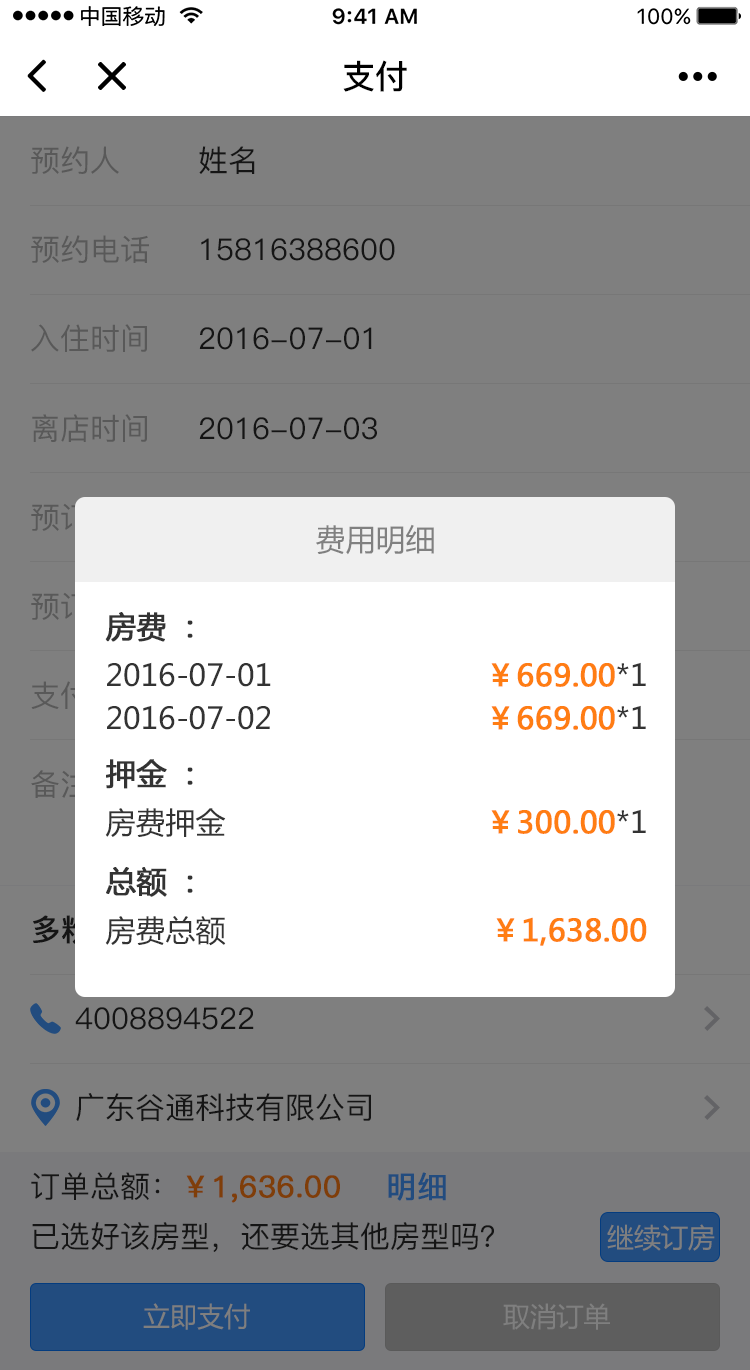
<style>
.page{position:relative;width:750px;height:1370px;background:#7f7f7f}
.page>*{position:absolute;margin:0}
.t1{font:33.2px "PingFang-SC-Bold";color:#000000}
.t2{font:30px "PingFang-SC-Medium";color:#595959}
.t3{font:30px "PingFang-SC-Medium";color:#2b2b2b}
.t4{font:30px "MicrosoftYaHei";color:#808080}
.t5{font:30px "MicrosoftYaHei";color:#333333;font-weight:bold}
.t6{font:30px "MicrosoftYaHei";color:#333333}
.t7{font:30px "MicrosoftYaHei";color:#ff7d13;font-weight:bold}
.t8{font:30px "PingFang-SC-Medium";font-weight:bold}
.t9{font:30px "PingFang-SC-Medium"}
.t10{font:30px "PingFang-SC-Medium";color:#224c7f;font-weight:bold}
.t11{font:27px "MicrosoftYaHei";color:#7f7f7f}
</style>
<div class="page">
<p class="t1" style="left:343px;top:60px;width:64px;height:32px">支付</p>
<p class="t2" style="left:31px;top:146px;width:88px;height:28px">预约人</p>
<p class="t3" style="left:199px;top:146px;width:56px;height:28px">姓名</p>
<p class="t2" style="left:31px;top:235px;width:118px;height:28px">预约电话</p>
<p class="t3" style="left:201px;top:238px;width:194px;height:23px">15816388600</p>
<p class="t2" style="left:31px;top:324px;width:116px;height:28px">入住时间</p>
<p class="t3" style="left:199px;top:327px;width:173px;height:23px">2016-07-01</p>
<p class="t2" style="left:32px;top:414px;width:115px;height:28px">离店时间</p>
<p class="t3" style="left:199px;top:417px;width:178px;height:23px">2016-07-03</p>
<p class="t4" style="left:316px;top:524px;width:118px;height:31px">费用明细</p>
<p class="t5" style="left:105px;top:612px;width:88px;height:30px">房费：</p>
<p class="t6" style="left:107px;top:662px;width:164px;height:25px">2016-07-01</p>
<p class="t7" style="left:491px;top:662px;width:155px;height:25px">￥669.00<span class="t6">*1</span></p>
<p class="t6" style="left:107px;top:705px;width:163px;height:25px">2016-07-02</p>
<p class="t7" style="left:491px;top:705px;width:155px;height:25px">￥669.00<span class="t6">*1</span></p>
<p class="t5" style="left:106px;top:759px;width:87px;height:30px">押金：</p>
<p class="t6" style="left:105px;top:808px;width:121px;height:29px">房费押金</p>
<p class="t7" style="left:491px;top:809px;width:155px;height:25px">￥300.00<span class="t6">*1</span></p>
<p class="t5" style="left:106px;top:867px;width:87px;height:30px">总额：</p>
<p class="t6" style="left:105px;top:916px;width:121px;height:30px">房费总额</p>
<p class="t7" style="left:496px;top:917px;width:151px;height:29px">￥1,638.00</p>
<p class="t3" style="left:75px;top:1007px;width:179px;height:23px">4008894522</p>
<p class="t3" style="left:76px;top:1093px;width:295px;height:28px">广东谷通科技有限公司</p>
<p class="t8" style="left:31px;top:1172px;width:309px;height:31px"><span class="t9">订单总额：</span>￥1,636.00</p>
<p class="t10" style="left:388px;top:1172px;width:58px;height:29px">明细</p>
<p class="t3" style="left:32px;top:1222px;width:462px;height:30px">已选好该房型，还要选其他房型吗？</p>
<p class="t11" style="left:607px;top:1224px;width:108px;height:27px">继续订房</p>
<p class="t11" style="left:143px;top:1303px;width:107px;height:27px">立即支付</p>
<p class="t11" style="left:503px;top:1303px;width:107px;height:27px">取消订单</p>
</div>
